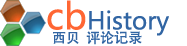
<style>
.page{position:relative;width:187px;height:46px;background:#ffffff}
.page>*{position:absolute;margin:0}
.t1{font:24px "MicrosoftYaHei";color:#3165a3}
.t2{font:36px "MicrosoftYaHei";color:#ff6633}
.t3{font:14px "AdobeHeitiStd-Regular";color:#3165a3}
</style>
<div class="page">
<p class="t1" style="left:47px;top:0px;width:122px;height:36px"><span class="t2">cb</span>History</p>
<p class="t3" style="left:53px;top:31px;width:89px;height:14px">西贝  评论记录</p>
</div>
